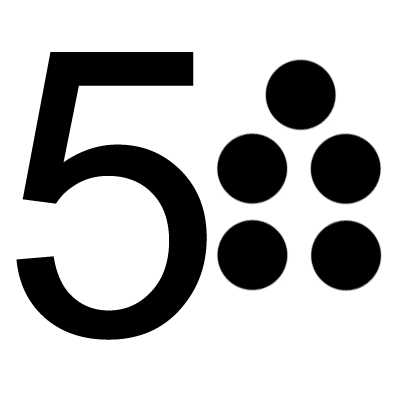
<style>
.page{position:relative;width:400px;height:400px;background:#ffffff}
.page>*{position:absolute;margin:0}
.t1{font:400.2px "ArialMT";color:#000000}
</style>
<div class="page">
<p class="t1" style="left:16px;top:52px;width:191px;height:288px">5</p>
</div>
